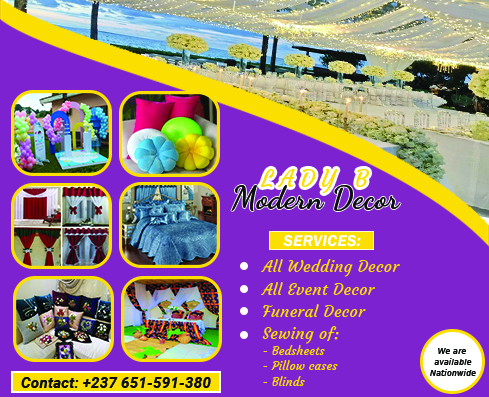
<style>
.page{position:relative;width:489px;height:397px;background:#7d22d0}
.page>*{position:absolute;margin:0}
.t1{font:23px "Courgette-Regular";letter-spacing:0.285em;color:#fbdf00}
.t2{font:31.1px "DancingScript-Bold";letter-spacing:0.017em;color:#0d1011}
.t3{font:16.1px "FranklinGothic-DemiItalic";letter-spacing:0.017em;color:#ffffff}
.t4{font:16.1px "Courgette-Regular";letter-spacing:0.017em;color:#fbdf00}
.t5{font:11.8px/15.1px "Courgette-Regular";letter-spacing:0.02em;color:#fbdf00}
.t6{font:9.3px "FranklinGothic-MediumItalic";letter-spacing:0.017em;color:#0b0d0c}
.t7{font:15px "Roboto-BoldItalic";letter-spacing:0.017em;color:#0d0f10}
</style>
<div class="page">
<p class="t1" style="left:260px;top:169px;width:110px;height:24px">LADY B</p>
<p class="t2" style="left:231px;top:185px;width:170px;height:26px">Modern Decor</p>
<p class="t3" style="left:283px;top:235px;width:78px;height:12px">SERVICES:</p>
<p class="t4" style="left:261px;top:259px;width:139px;height:18px">All Wedding Decor</p>
<p class="t4" style="left:261px;top:282px;width:114px;height:13px">All Event Decor</p>
<p class="t4" style="left:263px;top:304px;width:103px;height:14px">Funeral Decor</p>
<p class="t4" style="left:262px;top:326px;width:77px;height:18px">Sewing of:</p>
<p class="t5" style="left:263px;top:345px;width:75px;height:41px">- Bedsheets<br>- Pillow cases<br>- Blinds</p>
<p class="t6" style="left:430px;top:348px;width:46px;height:28px;text-align:center">We are <br>available<br>Nationwide</p>
<p class="t7" style="left:21px;top:377px;width:190px;height:11px">Contact: +237 651-591-380</p>
</div>
